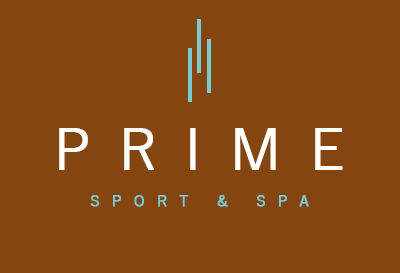
<style>
.page{position:relative;width:400px;height:273px;background:#84460e}
.page>*{position:absolute;margin:0}
.t1{font:56px "YuGothic-Regular";letter-spacing:0.48em;color:#ffffff;font-weight:bold}
.t2{font:15px "YuGothic-Regular";letter-spacing:0.78em;color:#79ccd0;font-weight:bold}
</style>
<div class="page">
<p class="t1" style="left:59px;top:128px;width:284px;height:42px">PRIME</p>
<p class="t2" style="left:90px;top:195px;width:219px;height:12px">SPORT &amp; SPA</p>
</div>
